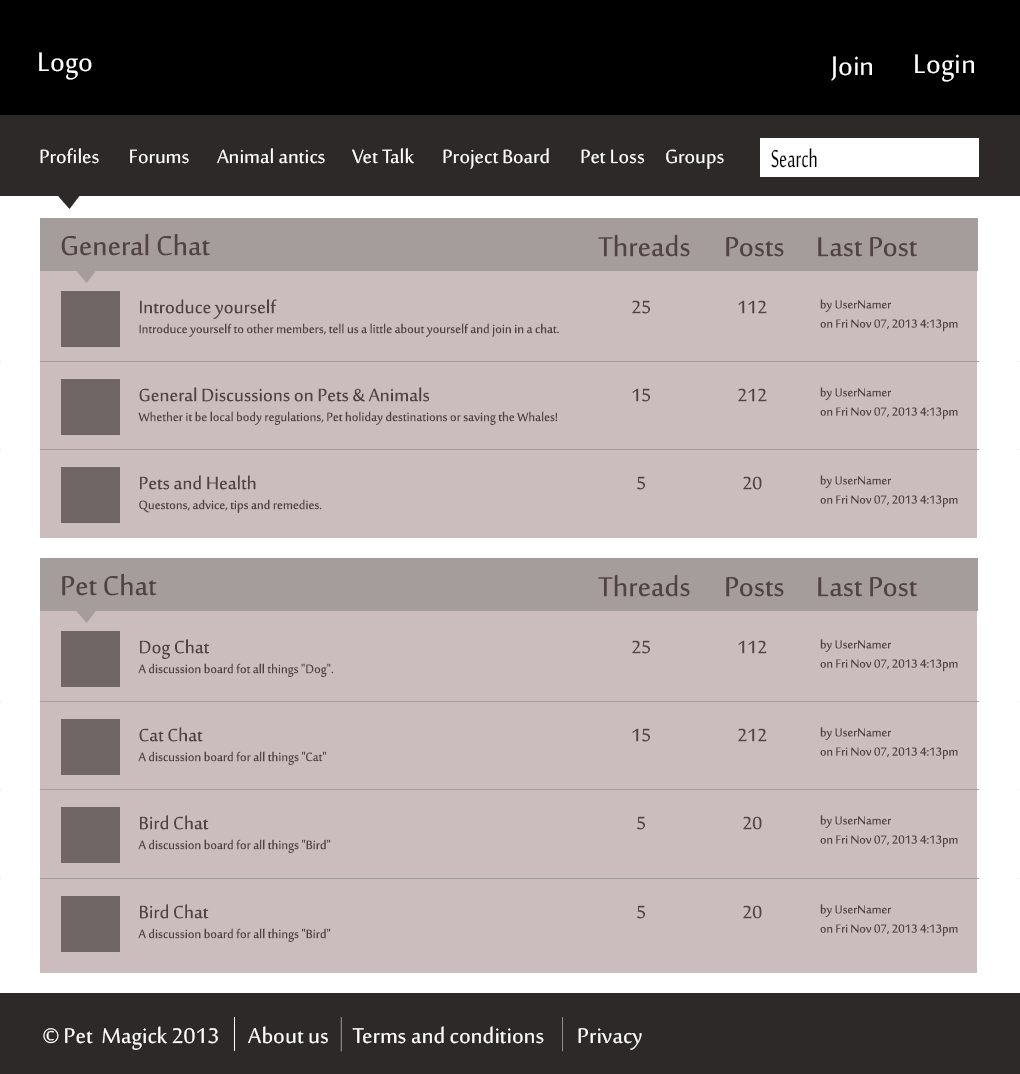
<style>
.page{position:relative;width:1020px;height:1074px;background:#cbbdbd}
.page>*{position:absolute;margin:0}
.t1{font:36.8px "SakkalMajalla";color:#ffffff}
.t2{font:26.2px "SakkalMajalla";color:#ffffff}
.t3{font:33.9px "SakkalMajalla";color:#000000;scale:0.67 1}
.t4{font:37.5px "SakkalMajalla";color:#504342}
.t5{font:16.5px "SakkalMajalla";color:#504342}
.t6{font:24.5px "SakkalMajalla";color:#504342}
.t7{font:16px "SakkalMajalla";color:#504342}
.t8{font:29.3px "SakkalMajalla";color:#ffffff}
</style>
<div class="page">
<p class="t1" style="left:39px;top:52px;width:53px;height:28px">Logo</p>
<p class="t1" style="left:915px;top:54px;width:59px;height:28px">Login</p>
<p class="t1" style="left:831px;top:56px;width:41px;height:25px">Join</p>
<p class="t2" style="left:40px;top:148px;width:59px;height:16px">Profiles</p>
<p class="t2" style="left:130px;top:149px;width:59px;height:15px">Forums</p>
<p class="t2" style="left:217px;top:148px;width:108px;height:16px">Animal antics</p>
<p class="t2" style="left:352px;top:148px;width:62px;height:16px">Vet Talk</p>
<p class="t2" style="left:443px;top:148px;width:106px;height:21px">Project Board</p>
<p class="t2" style="left:581px;top:149px;width:64px;height:15px">Pet Loss</p>
<p class="t2" style="left:666px;top:149px;width:58px;height:20px">Groups</p>
<p class="t3" style="left:771px;top:148px;width:46px;height:20px">Search</p>
<p class="t4" style="left:61px;top:233px;width:149px;height:23px">General Chat</p>
<p class="t4" style="left:598px;top:234px;width:92px;height:23px">Threads</p>
<p class="t4" style="left:726px;top:237px;width:58px;height:20px">Posts</p>
<p class="t4" style="left:818px;top:237px;width:99px;height:20px">Last Post</p>
<p class="t5" style="left:139px;top:299px;width:420px;height:38px"><span class="t6">Introduce yourself<br></span>Introduce yourself to other members, tell us a little about yourself and join in a chat.</p>
<p class="t6" style="left:632px;top:300px;width:18px;height:14px">25</p>
<p class="t6" style="left:738px;top:300px;width:29px;height:14px">112</p>
<p class="t7" style="left:820px;top:299px;width:138px;height:33px">by UserNamer<br>on Fri Nov 07, 2013 4:13pm</p>
<p class="t5" style="left:138px;top:387px;width:420px;height:38px"><span class="t6">General Discussions on Pets &amp; Animals<br></span>Whether it be local body regulations, Pet holiday destinations or saving the Whales!</p>
<p class="t6" style="left:632px;top:388px;width:18px;height:14px">15</p>
<p class="t6" style="left:738px;top:388px;width:29px;height:14px">212</p>
<p class="t7" style="left:820px;top:387px;width:138px;height:33px">by UserNamer<br>on Fri Nov 07, 2013 4:13pm</p>
<p class="t5" style="left:139px;top:475px;width:183px;height:38px"><span class="t6">Pets and Health<br></span>Questons, advice, tips and remedies.</p>
<p class="t6" style="left:637px;top:476px;width:8px;height:14px">5</p>
<p class="t6" style="left:743px;top:476px;width:19px;height:14px">20</p>
<p class="t7" style="left:820px;top:475px;width:138px;height:33px">by UserNamer<br>on Fri Nov 07, 2013 4:13pm</p>
<p class="t4" style="left:62px;top:573px;width:95px;height:23px">Pet Chat</p>
<p class="t4" style="left:598px;top:574px;width:92px;height:23px">Threads</p>
<p class="t4" style="left:726px;top:577px;width:58px;height:20px">Posts</p>
<p class="t4" style="left:818px;top:577px;width:99px;height:20px">Last Post</p>
<p class="t5" style="left:138px;top:639px;width:196px;height:38px"><span class="t6">Dog Chat<br></span>A discussion board fot all things "Dog".</p>
<p class="t6" style="left:632px;top:640px;width:18px;height:14px">25</p>
<p class="t6" style="left:738px;top:640px;width:29px;height:14px">112</p>
<p class="t7" style="left:820px;top:639px;width:138px;height:33px">by UserNamer<br>on Fri Nov 07, 2013 4:13pm</p>
<p class="t5" style="left:138px;top:727px;width:188px;height:38px"><span class="t6">Cat Chat<br></span>A discussion board for all things "Cat"</p>
<p class="t6" style="left:632px;top:728px;width:18px;height:14px">15</p>
<p class="t6" style="left:738px;top:728px;width:29px;height:14px">212</p>
<p class="t7" style="left:820px;top:727px;width:138px;height:33px">by UserNamer<br>on Fri Nov 07, 2013 4:13pm</p>
<p class="t5" style="left:138px;top:815px;width:193px;height:38px"><span class="t6">Bird Chat<br></span>A discussion board for all things "Bird"</p>
<p class="t6" style="left:637px;top:816px;width:8px;height:14px">5</p>
<p class="t6" style="left:743px;top:816px;width:19px;height:14px">20</p>
<p class="t7" style="left:820px;top:815px;width:138px;height:33px">by UserNamer<br>on Fri Nov 07, 2013 4:13pm</p>
<p class="t5" style="left:138px;top:904px;width:193px;height:38px"><span class="t6">Bird Chat<br></span>A discussion board for all things "Bird"</p>
<p class="t6" style="left:637px;top:905px;width:8px;height:14px">5</p>
<p class="t6" style="left:743px;top:905px;width:19px;height:14px">20</p>
<p class="t7" style="left:820px;top:904px;width:138px;height:33px">by UserNamer<br>on Fri Nov 07, 2013 4:13pm</p>
<p class="t8" style="left:43px;top:1026px;width:175px;height:24px">© Pet  Magick 2013</p>
<p class="t8" style="left:248px;top:1026px;width:80px;height:18px">About us</p>
<p class="t8" style="left:352px;top:1026px;width:192px;height:18px">Terms and conditions</p>
<p class="t8" style="left:578px;top:1028px;width:64px;height:22px">Privacy</p>
</div>
